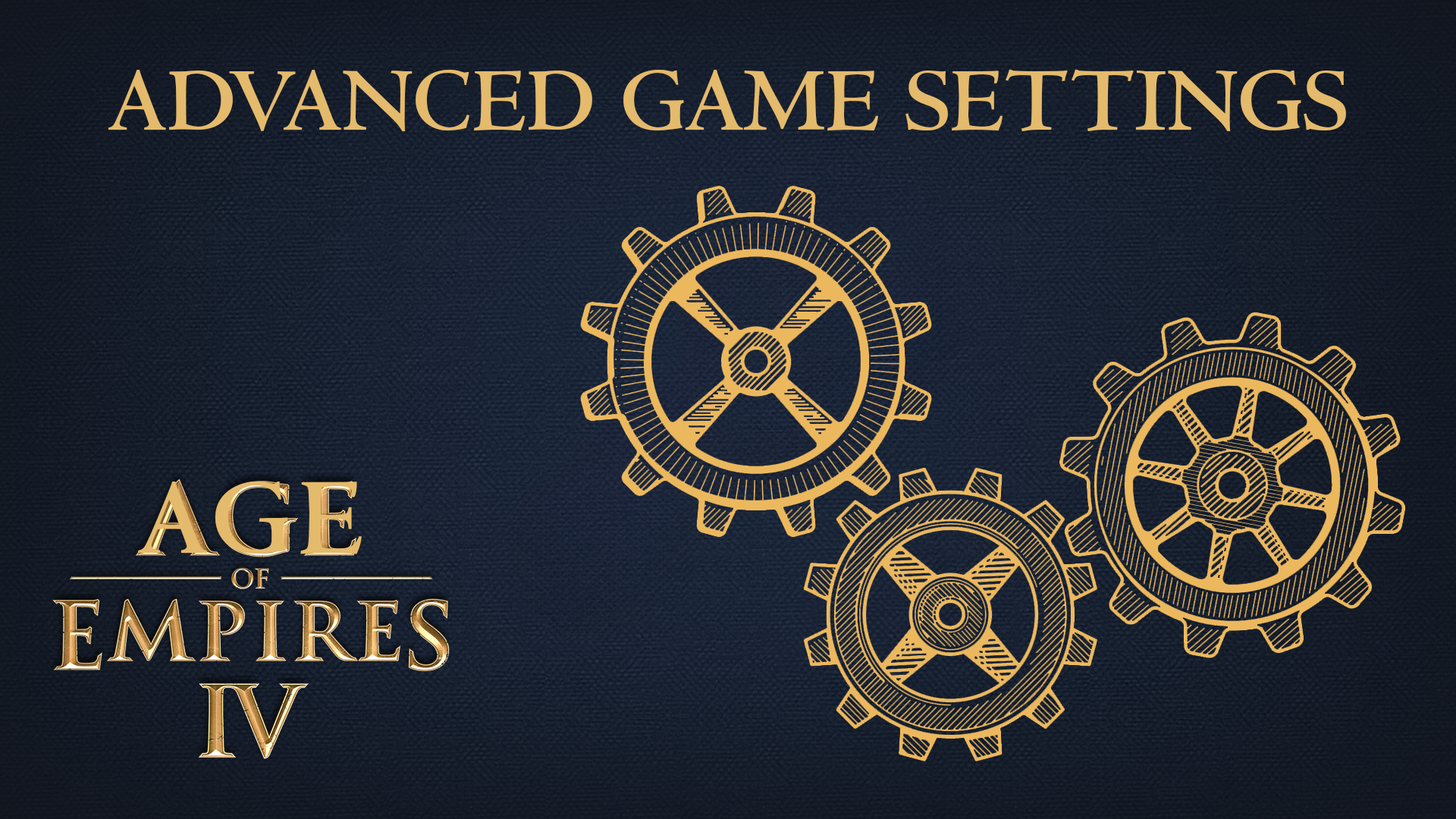
<style>
.page{position:relative;width:1456px;height:819px}
.page>*{position:absolute;margin:0}
.t1{font:94px "CentaurMT-Bold";color:#e4ba6c}
.t2{font:113px "CentaurMT-Bold";letter-spacing:0.08em;color:#e4ba6c}
</style>
<div class="page">
<p class="t1" style="left:108px;top:69px;width:1238px;height:62px">ADVANCED GAME SETTINGS</p>
<p class="t2" style="left:138px;top:482px;width:224px;height:72px">AGE</p>
</div>
